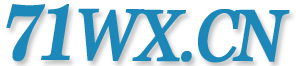
<style>
.page{position:relative;width:296px;height:66px;background:#ffffff}
.page>*{position:absolute;margin:0}
.t1{font:79.9px "NewCenturySchlbk-Bold";letter-spacing:-0.05em;color:#1c88b9;font-style:italic;scale:0.88 1}
.t2{font:72.6px "Vani";letter-spacing:-0.05em;color:#1c88b9;font-weight:bold;font-style:italic;scale:0.88 1}
.t3{font:72.6px "ArialMT";letter-spacing:-0.05em;color:#1c88b9;font-weight:bold;font-style:italic;scale:0.88 1}
</style>
<div class="page">
<p class="t1" style="left:6px;top:4px;width:64px;height:58px">71</p>
<p class="t2" style="left:78px;top:8px;width:212px;height:55px">WX.CN<span class="t3">。</span></p>
</div>
